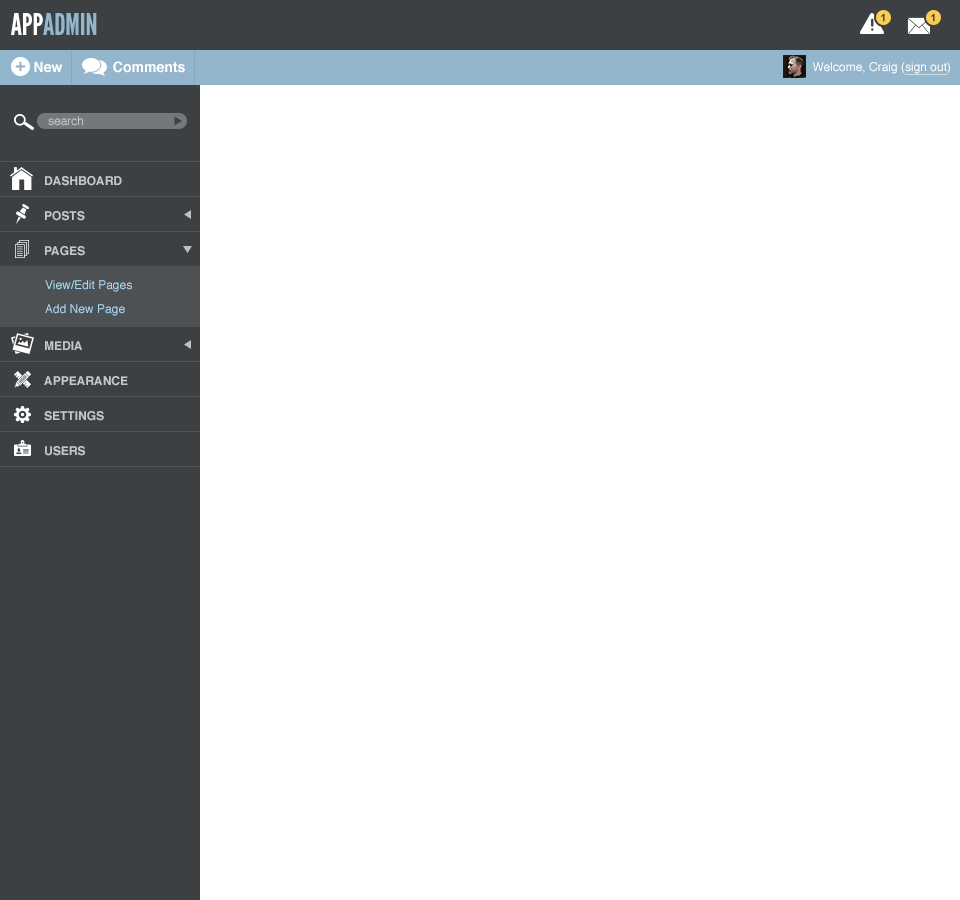
<style>
.page{position:relative;width:960px;height:900px;background:#ffffff}
.page>*{position:absolute;margin:0}
.t1{font:30px "LeagueGothic";color:#93b6cd}
.t2{font:30px "LeagueGothic";color:#ffffff}
.t3{font:14px "Helvetica-Bold";color:#ffffff}
.t4{font:12px "Helvetica";color:#ffffff}
.t5{font:12px "Helvetica";color:#ffffff;text-decoration:underline}
.t6{font:12px "Helvetica";color:#c2c8cc}
.t7{font:12px "Helvetica-Bold";color:#c2c8cc}
.t8{font:12px/24px "Helvetica";color:#a9d7f6}
</style>
<div class="page">
<p class="t1" style="left:11px;top:13px;width:86px;height:22px"><span class="t2">APP</span>ADMIN</p>
<p class="t3" style="left:34px;top:61px;width:29px;height:12px">New</p>
<p class="t3" style="left:113px;top:61px;width:72px;height:12px">Comments</p>
<p class="t4" style="left:813px;top:62px;width:137px;height:13px">Welcome, Craig (<span class="t5">sign out</span>)</p>
<p class="t6" style="left:48px;top:116px;width:35px;height:10px">search</p>
<p class="t7" style="left:45px;top:176px;width:77px;height:10px">DASHBOARD</p>
<p class="t7" style="left:45px;top:211px;width:40px;height:10px">POSTS</p>
<p class="t7" style="left:45px;top:246px;width:40px;height:10px">PAGES</p>
<p class="t8" style="left:45px;top:280px;width:87px;height:36px">View/Edit Pages<br>Add New Page</p>
<p class="t7" style="left:45px;top:341px;width:37px;height:9px">MEDIA</p>
<p class="t7" style="left:44px;top:376px;width:84px;height:10px">APPEARANCE</p>
<p class="t7" style="left:44px;top:411px;width:60px;height:10px">SETTINGS</p>
<p class="t7" style="left:45px;top:446px;width:40px;height:10px">USERS</p>
</div>
